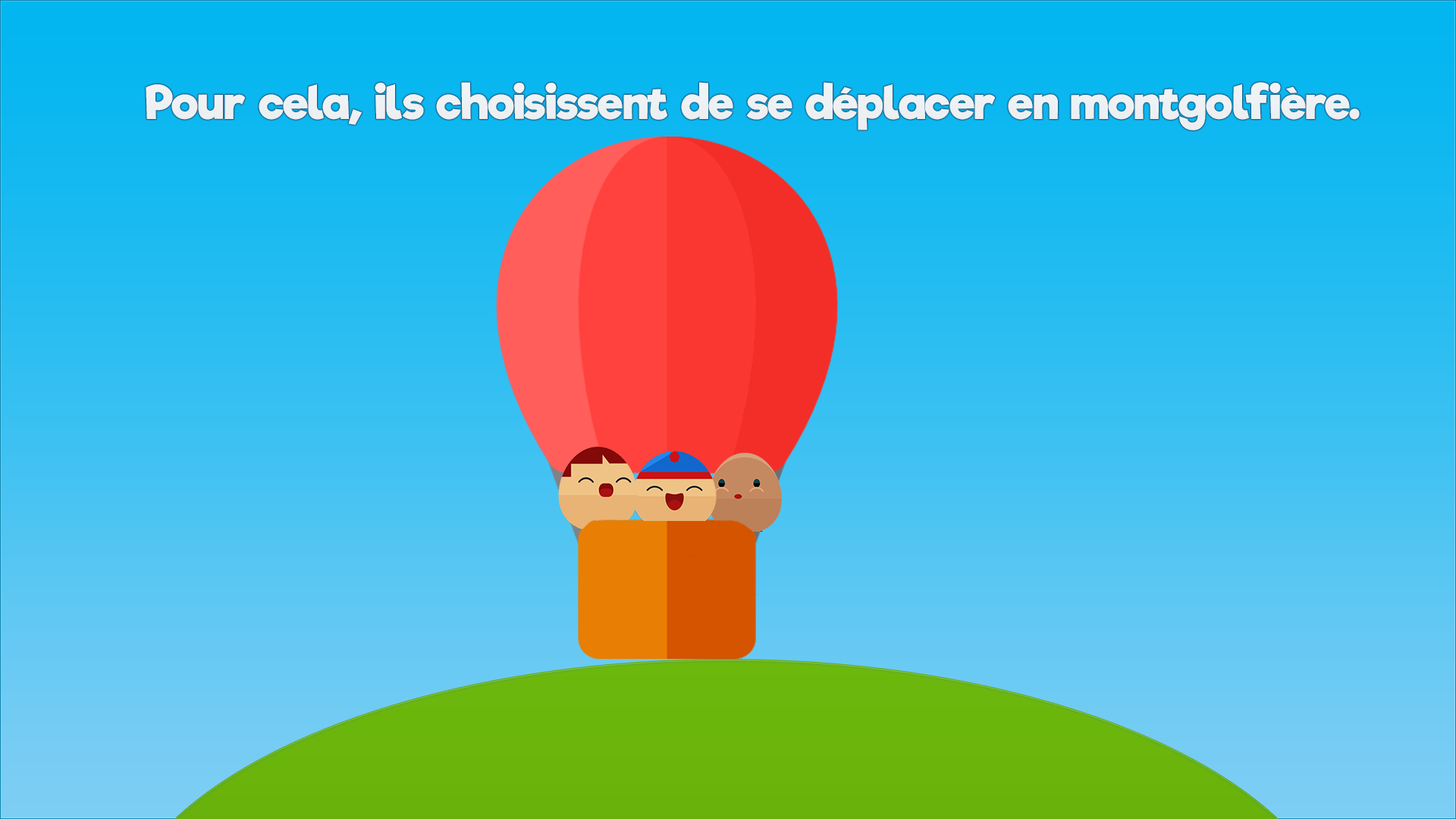
<style>
.page{position:relative;width:1456px;height:819px}
.page>*{position:absolute;margin:0}
.t1{font:45.5px "RifficFree-Bold";color:#edf1f3}
</style>
<div class="page">
<p class="t1" style="left:146px;top:82px;width:1214px;height:48px">Pour cela, ils choisissent de se déplacer en montgolfière.</p>
</div>
